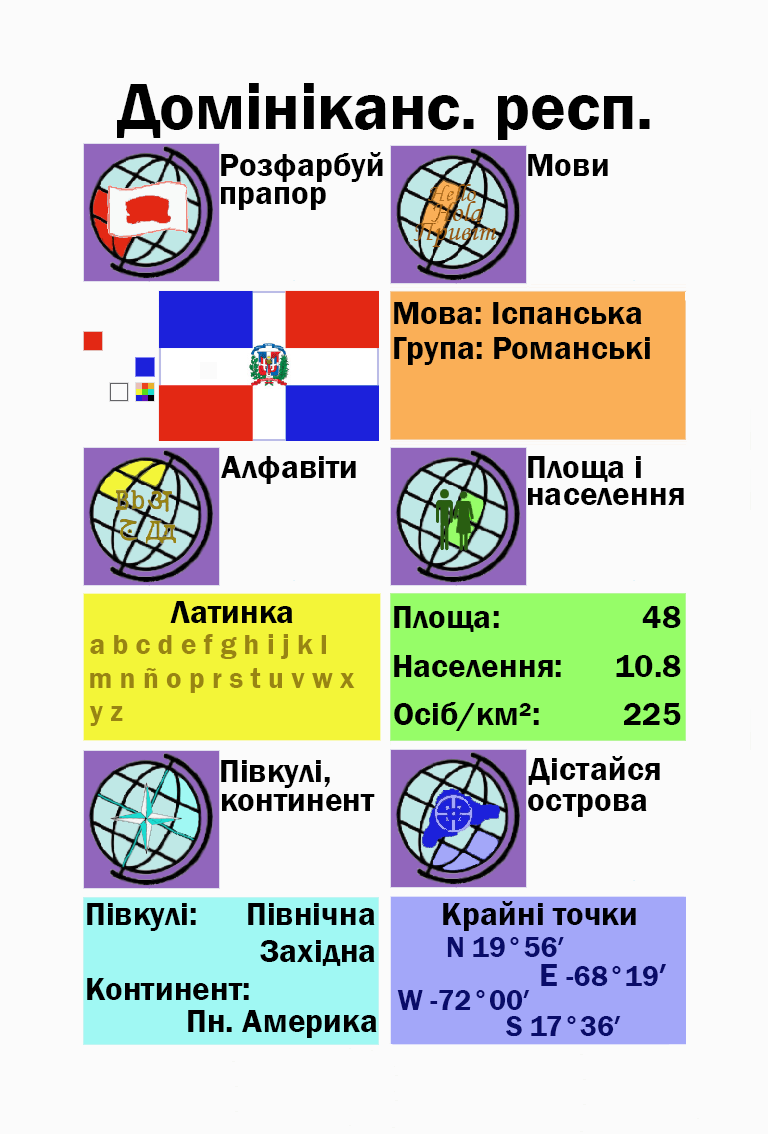
<style>
.page{position:relative;width:768px;height:1134px;background:#fbfbfb}
.page>*{position:absolute;margin:0}
.t1{font:66.7px "FranklinGothic-Demi";color:#000000}
.t2{font:33.3px "FranklinGothic-Demi";color:#000000}
.t3{font:33.3px "FranklinGothic-Demi";color:#000003}
.t4{font:29.2px "FranklinGothic-Demi";color:#988413}
.t5{font:29.2px "FranklinGothic-Demi";color:#090c69}
.t6{font:33.3px "FranklinGothic-Demi";color:#090c69}
</style>
<div class="page">
<p class="t1" style="left:117px;top:83px;width:533px;height:57px">Домініканс. респ.</p>
<p class="t2" style="left:221px;top:152px;width:162px;height:30px">Розфарбуй</p>
<p class="t2" style="left:528px;top:154px;width:80px;height:22px">Мови</p>
<p class="t2" style="left:221px;top:187px;width:105px;height:23px">прапор</p>
<p class="t2" style="left:394px;top:302px;width:248px;height:22px">Мова: Іспанська</p>
<p class="t2" style="left:394px;top:337px;width:256px;height:28px">Група: Романські</p>
<p class="t2" style="left:221px;top:456px;width:135px;height:28px">Алфавіти</p>
<p class="t2" style="left:528px;top:456px;width:113px;height:26px">Площа і</p>
<p class="t2" style="left:528px;top:488px;width:156px;height:17px">населення</p>
<p class="t2" style="left:170px;top:601px;width:123px;height:22px">Латинка</p>
<p class="t2" style="left:394px;top:606px;width:105px;height:26px">Площа:</p>
<p class="t3" style="left:642px;top:606px;width:39px;height:22px">48</p>
<p class="t4" style="left:90px;top:634px;width:236px;height:25px">a b c d e f g h i j k l</p>
<p class="t2" style="left:394px;top:655px;width:167px;height:22px">Населення:</p>
<p class="t2" style="left:616px;top:655px;width:65px;height:22px">10.8</p>
<p class="t4" style="left:90px;top:668px;width:265px;height:25px">m n ñ o p r s t u v w x</p>
<p class="t2" style="left:394px;top:702px;width:145px;height:29px">Осіб/км²:</p>
<p class="t4" style="left:89px;top:706px;width:34px;height:20px">y z</p>
<p class="t2" style="left:624px;top:703px;width:57px;height:22px">225</p>
<p class="t2" style="left:221px;top:760px;width:109px;height:28px">Півкулі,</p>
<p class="t2" style="left:528px;top:756px;width:132px;height:29px">Дістайся</p>
<p class="t2" style="left:222px;top:794px;width:153px;height:17px">континент</p>
<p class="t2" style="left:528px;top:794px;width:119px;height:23px">острова</p>
<p class="t2" style="left:87px;top:903px;width:109px;height:28px">Півкулі:</p>
<p class="t2" style="left:248px;top:903px;width:127px;height:22px">Північна</p>
<p class="t3" style="left:443px;top:901px;width:193px;height:30px">Крайні точки</p>
<p class="t2" style="left:260px;top:940px;width:115px;height:26px">Західна</p>
<p class="t5" style="left:447px;top:937px;width:117px;height:20px">N 19°56′</p>
<p class="t5" style="left:541px;top:964px;width:125px;height:22px"><span class="t6">E </span>-68°19<span class="t6">′</span></p>
<p class="t2" style="left:87px;top:978px;width:162px;height:22px">Континент:</p>
<p class="t5" style="left:397px;top:990px;width:133px;height:20px">W -72°00′</p>
<p class="t2" style="left:188px;top:1010px;width:189px;height:28px">Пн. Америка</p>
<p class="t5" style="left:506px;top:1016px;width:115px;height:21px">S 17°36′</p>
</div>
